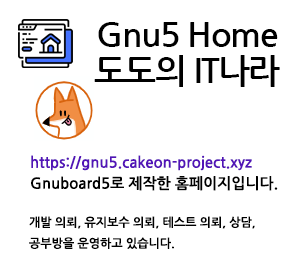
<style>
.page{position:relative;width:300px;height:280px;background:#ffffff}
.page>*{position:absolute;margin:0}
.t1{font:34px/36px "NanumGothicBold";letter-spacing:-0.04em;color:#000000}
.t2{font:15px "NanumGothicBold";color:#5213b7}
.t3{font:15px "NanumGothicBold";color:#000000}
.t4{font:12px "NanumGothicBold";color:#000000}
</style>
<div class="page">
<p class="t1" style="left:94px;top:22px;width:186px;height:65px;text-align:center">Gnu5 Home<br>도도의 IT나라</p>
<p class="t2" style="left:31px;top:155px;width:221px;height:16px">https://gnu5.cakeon-project.xyz</p>
<p class="t3" style="left:31px;top:176px;width:247px;height:15px">Gnuboard5로 제작한 홈페이지입니다.</p>
<p class="t4" style="left:29px;top:216px;width:226px;height:33px">개발 의뢰, 유지보수 의뢰, 테스트 의뢰, 상담, <br>공부방을 운영하고 있습니다.</p>
</div>
